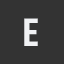
<style>
.page{position:relative;width:64px;height:64px;background:#333333}
.page>*{position:absolute;margin:0}
.t1{font:40px "SairaCondensed-Bold";color:#ffffff}
</style>
<div class="page">
<p class="t1" style="left:24px;top:18px;width:14px;height:28px">E</p>
</div>
